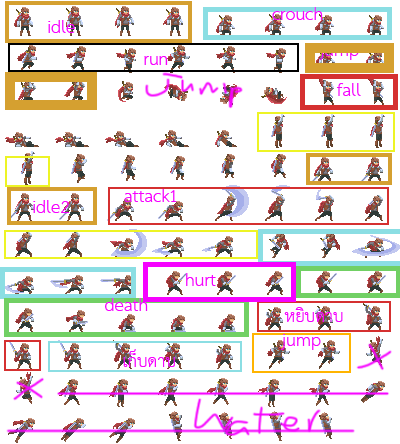
<style>
.page{position:relative;width:400px;height:444px;background:#ffffff}
.page>*{position:absolute;margin:0}
.t1{font:25px "THSarabunNew";color:#f601ff}
.t2{font:25px "THSarabunNew"}
</style>
<div class="page">
<p class="t1" style="left:272px;top:7px;width:51px;height:13px">crouch</p>
<p class="t1" style="left:48px;top:20px;width:27px;height:13px">idle</p>
<p class="t2" style="left:319px;top:44px;width:40px;height:16px">jump</p>
<p class="t1" style="left:144px;top:56px;width:24px;height:9px">run</p>
<p class="t1" style="left:337px;top:83px;width:24px;height:13px">fall</p>
<p class="t1" style="left:124px;top:189px;width:53px;height:13px">attack1</p>
<p class="t1" style="left:33px;top:200px;width:36px;height:13px">idle2</p>
<p class="t1" style="left:186px;top:273px;width:30px;height:13px">hurt</p>
<p class="t1" style="left:105px;top:298px;width:43px;height:13px">death</p>
<p class="t1" style="left:284px;top:307px;width:59px;height:15px">หยิบดาบ</p>
<p class="t1" style="left:280px;top:334px;width:41px;height:16px">jump</p>
<p class="t1" style="left:123px;top:349px;width:52px;height:18px">เก็บดาบ</p>
</div>
